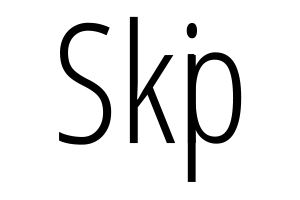
<style>
.page{position:relative;width:300px;height:200px;background:#ffffff}
.page>*{position:absolute;margin:0}
.t1{font:166.2px "OpenSans-CondensedLight";color:#000000}
</style>
<div class="page">
<p class="t1" style="left:59px;top:16px;width:138px;height:129px">Ski</p>
<p class="t1" style="left:187px;top:52px;width:55px;height:130px">p</p>
</div>
